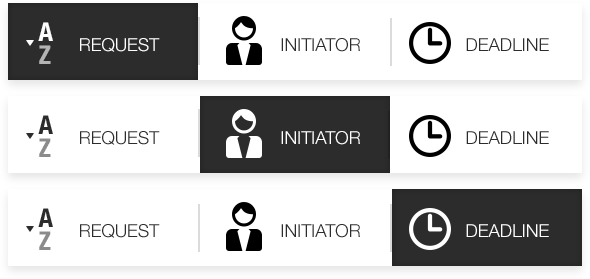
<style>
.page{position:relative;width:590px;height:279px;background:#ffffff}
.page>*{position:absolute;margin:0}
.t1{font:26px "HelveticaNeue-CondensedBold";color:#ffffff;text-transform:uppercase}
.t2{font:18px "HelveticaNeue-Light";color:#ffffff;text-transform:uppercase}
.t3{font:18px "HelveticaNeue-Light";color:#2c2c2c;text-transform:uppercase}
.t4{font:26px "HelveticaNeue-CondensedBold";color:#b4b4b4;text-transform:uppercase}
.t5{font:26px "HelveticaNeue-CondensedBold";color:#2c2c2c;text-transform:uppercase}
.t6{font:26px "HelveticaNeue-CondensedBold";color:#8b8b8b;text-transform:uppercase}
</style>
<div class="page">
<p class="t1" style="left:38px;top:22px;width:15px;height:19px">A</p>
<p class="t2" style="left:80px;top:38px;width:80px;height:14px">REQUEST</p>
<p class="t3" style="left:281px;top:38px;width:79px;height:14px">Initiator</p>
<p class="t3" style="left:466px;top:38px;width:83px;height:13px">DEADLINE</p>
<p class="t4" style="left:39px;top:45px;width:12px;height:19px">Z</p>
<p class="t5" style="left:38px;top:115px;width:15px;height:19px">A</p>
<p class="t3" style="left:80px;top:131px;width:80px;height:14px">REQUEST</p>
<p class="t2" style="left:281px;top:131px;width:79px;height:14px">Initiator</p>
<p class="t3" style="left:466px;top:131px;width:83px;height:13px">DEADLINE</p>
<p class="t6" style="left:39px;top:138px;width:12px;height:19px">Z</p>
<p class="t5" style="left:38px;top:208px;width:15px;height:19px">A</p>
<p class="t6" style="left:39px;top:231px;width:12px;height:19px">Z</p>
<p class="t3" style="left:80px;top:224px;width:80px;height:14px">REQUEST</p>
<p class="t3" style="left:281px;top:224px;width:79px;height:14px">Initiator</p>
<p class="t2" style="left:466px;top:224px;width:83px;height:13px">DEADLINE</p>
</div>
